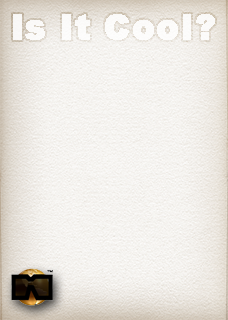
<style>
.page{position:relative;width:228px;height:320px}
.page>*{position:absolute;margin:0}
.t1{font:34.8px "Arial-Black";color:#ffffff;font-weight:bold}
</style>
<div class="page">
<p class="t1" style="left:13px;top:14px;width:202px;height:26px;opacity:0.8">Is It Cool?</p>
</div>
